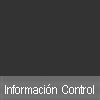
<style>
.page{position:relative;width:100px;height:100px;background:#333333}
.page>*{position:absolute;margin:0}
.t1{font:12px "ArialNarrow";color:#ffffff}
</style>
<div class="page">
<p class="t1" style="left:5px;top:84px;width:89px;height:10px">Información Control</p>
</div>
